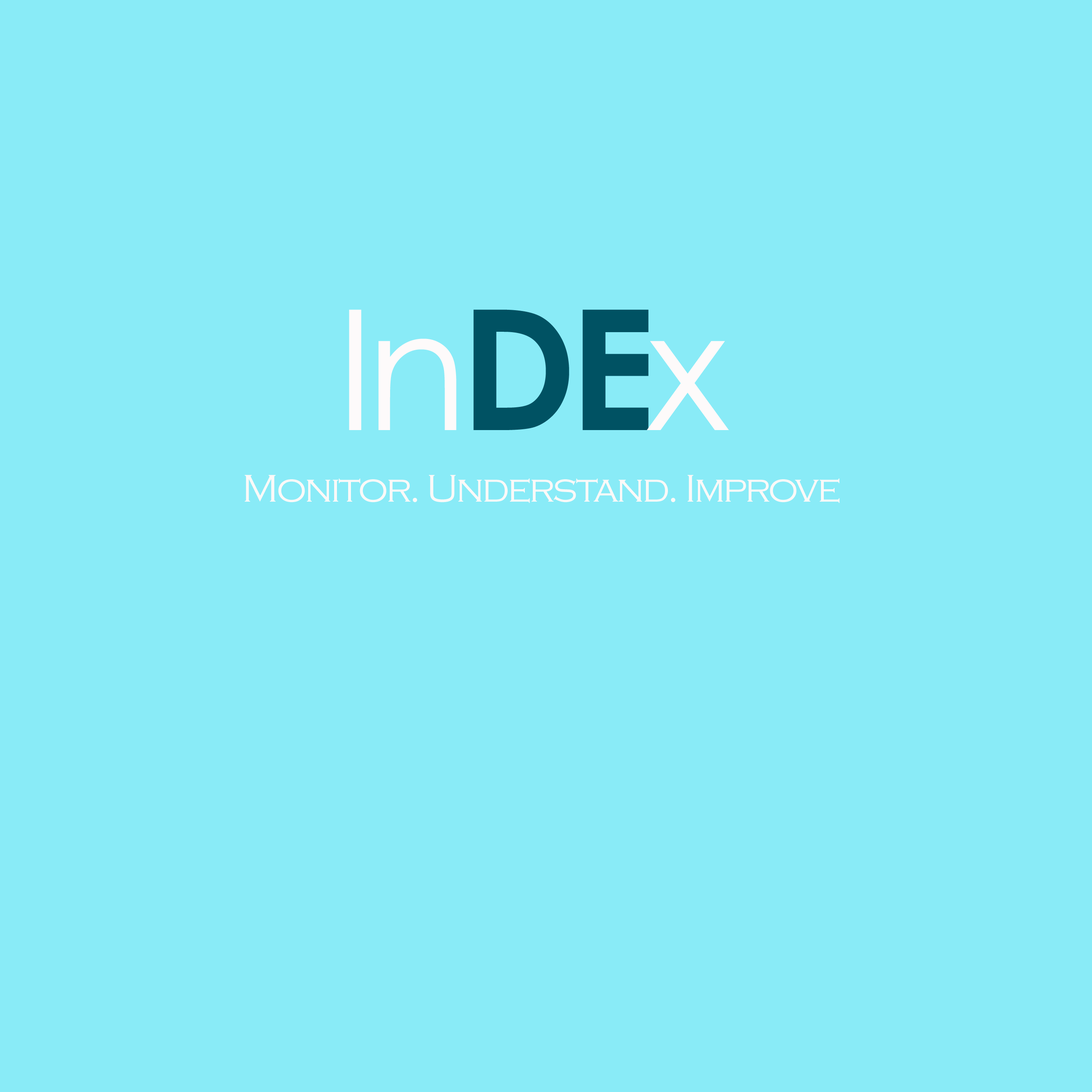
<style>
.page{position:relative;width:1092px;height:1092px;background:#89ebf7}
.page>*{position:absolute;margin:0}
.t1{font:167.7px "CenturyGothic";letter-spacing:-0.05em;color:#fdfafa}
.t2{font:167.7px "CenturyGothic-Bold";letter-spacing:-0.05em;color:#005263}
.t3{font:40px "CopperplateGothic-Light";letter-spacing:-0.05em;color:#fcf9f8}
</style>
<div class="page">
<p class="t1" style="left:349px;top:309px;width:380px;height:121px">In<span class="t2">DE</span>x</p>
<p class="t3" style="left:245px;top:475px;width:595px;height:28px">Monitor. Understand. Improve</p>
</div>
